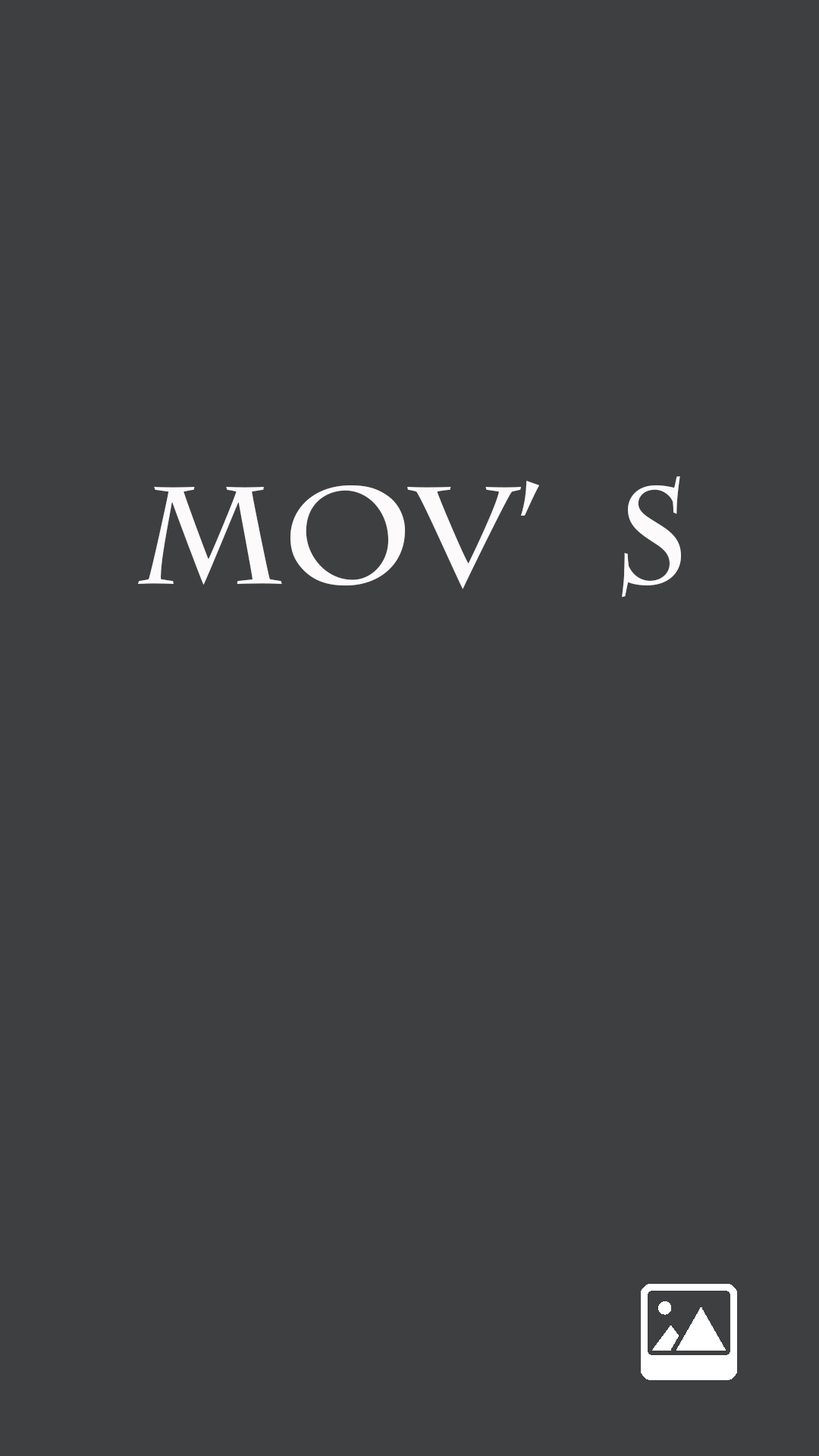
<style>
.page{position:relative;width:819px;height:1456px;background:#3d3f41}
.page>*{position:absolute;margin:0}
.t1{font:136.5px "CharlemagneStd-Bold";color:#fcfafa}
</style>
<div class="page">
<p class="t1" style="left:138px;top:476px;width:543px;height:122px">Mov’S</p>
</div>
